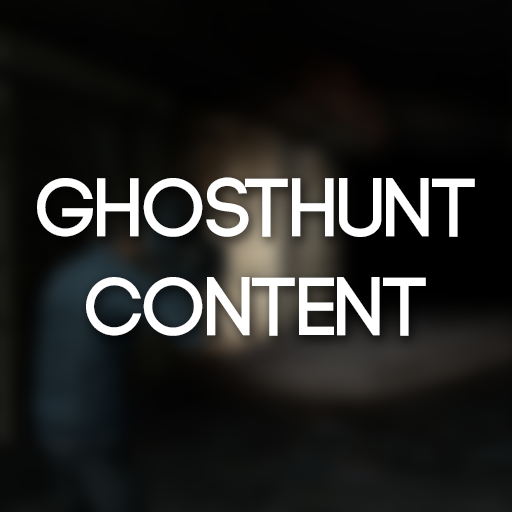
<style>
.page{position:relative;width:512px;height:512px}
.page>*{position:absolute;margin:0}
.t1{font:82px "Code-Bold";color:#ffffff}
</style>
<div class="page">
<p class="t1" style="left:37px;top:177px;width:438px;height:159px;text-align:center">GHOSTHUNT<br>CONTENT</p>
</div>
